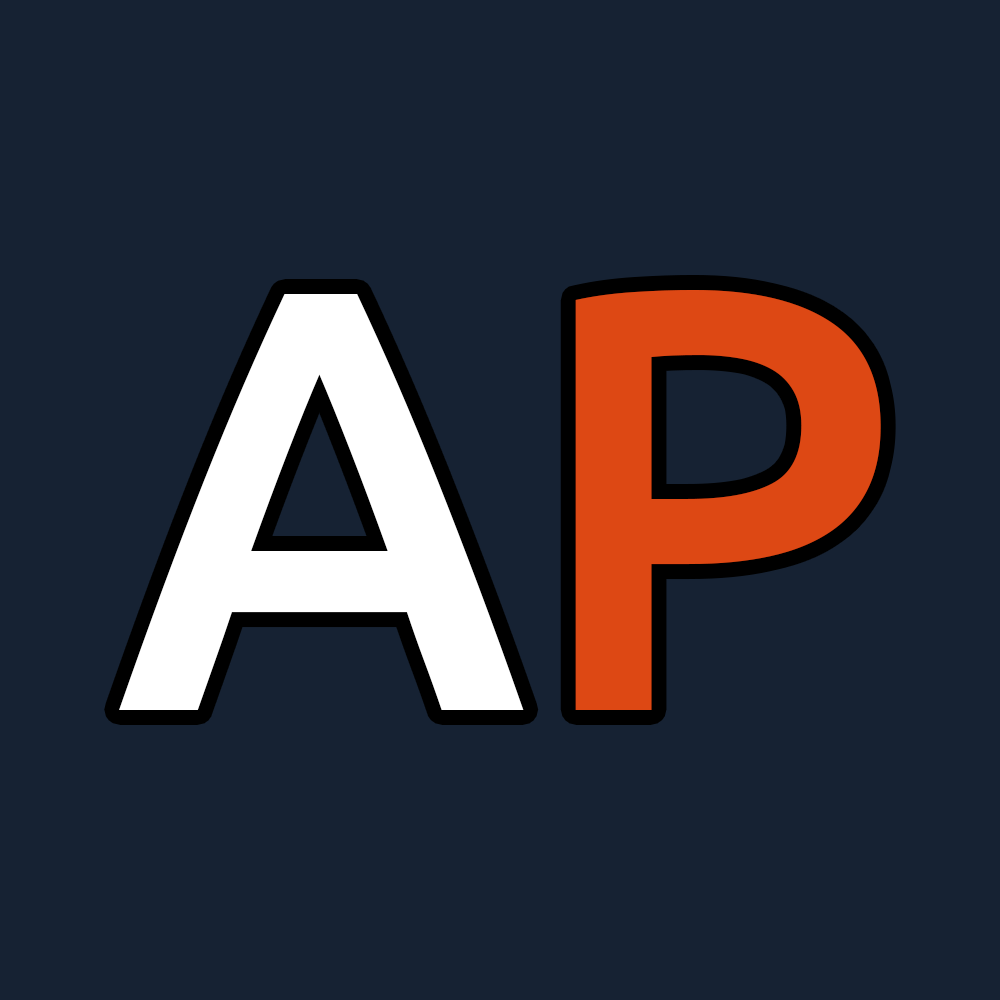
<style>
.page{position:relative;width:1000px;height:1000px;background:#162233}
.page>*{position:absolute;margin:0}
.t1{font:600px "Ubuntu-Medium";color:#ffffff}
.t2{font:600px "Ubuntu-Medium";color:#dd4814}
</style>
<div class="page">
<p class="t1" style="left:119px;top:290px;width:762px;height:420px">A<span class="t2">P</span></p>
</div>
